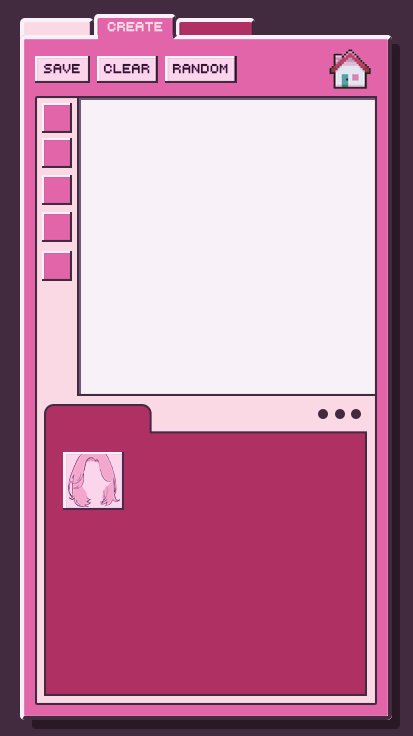
<style>
.page{position:relative;width:413px;height:736px;background:#f8f2f8}
.page>*{position:absolute;margin:0}
.t1{font:12.5px "RetroComputer";letter-spacing:0.025em;color:#f9dbdb;text-transform:uppercase;font-weight:bold;scale:0.83 1}
.t2{font:12.5px "RetroComputer";letter-spacing:0.025em;color:#291925;text-transform:uppercase;font-weight:bold;scale:0.83 1}
</style>
<div class="page">
<p class="t1" style="left:107px;top:21px;width:56px;height:11px">create</p>
<p class="t2" style="left:43px;top:63px;width:37px;height:11px">save</p>
<p class="t2" style="left:103px;top:63px;width:47px;height:11px">clear</p>
<p class="t2" style="left:172px;top:63px;width:56px;height:11px">random</p>
</div>
